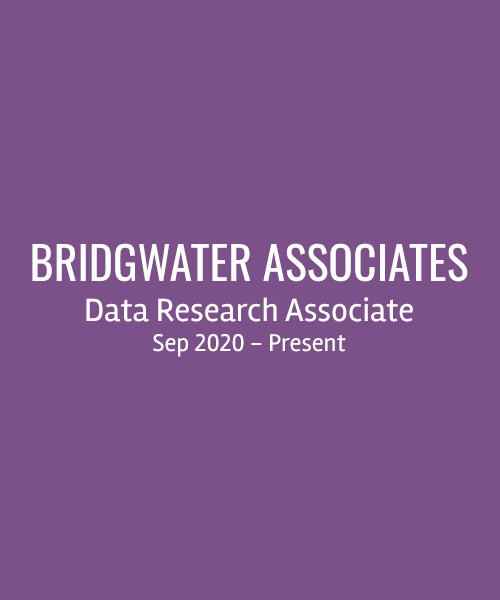
<style>
.page{position:relative;width:500px;height:600px;background:#7c5189}
.page>*{position:absolute;margin:0}
.t1{font:33.3px "Rambla-Regular";color:#ffffff}
.t2{font:45.8px "Oswald-Regular";color:#ffffff}
.t3{font:25px "Rambla-Regular";color:#ffffff}
</style>
<div class="page">
<p class="t1" style="left:32px;top:243px;width:436px;height:114px;text-align:center"><span class="t2">BRIDGWATER ASSOCIATES<br></span>Data Research Associate<br><span class="t3">Sep 2020 - Present</span></p>
</div>
